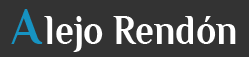
<style>
.page{position:relative;width:249px;height:57px;background:#333333}
.page>*{position:absolute;margin:0}
.t1{font:52.8px "Philosopher-Bold";color:#1693c2;scale:0.88 1}
.t2{font:42.2px "Philosopher-Bold";color:#ffffff;scale:0.88 1}
.t3{font:52.8px "Philosopher-Bold";color:#ffffff;scale:0.88 1}
</style>
<div class="page">
<p class="t1" style="left:11px;top:9px;width:32px;height:35px">A</p>
<p class="t2" style="left:44px;top:16px;width:192px;height:36px"><span class="t3">   </span>lejo Rendón</p>
</div>
